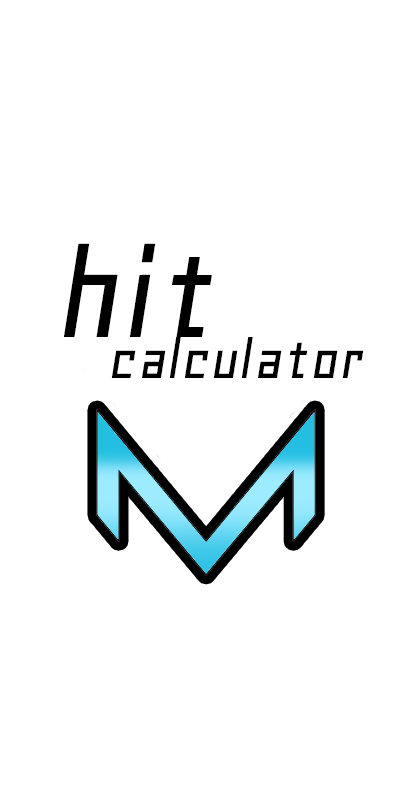
<style>
.page{position:relative;width:414px;height:812px;background:#ffffff}
.page>*{position:absolute;margin:0}
.t1{font:141px "Geo-Oblique";color:#000000}
.t2{font:62px "Geo-Oblique";color:#000000}
</style>
<div class="page">
<p class="t1" style="left:63px;top:243px;width:149px;height:94px">hit</p>
<p class="t2" style="left:111px;top:337px;width:253px;height:41px">calculator</p>
</div>
